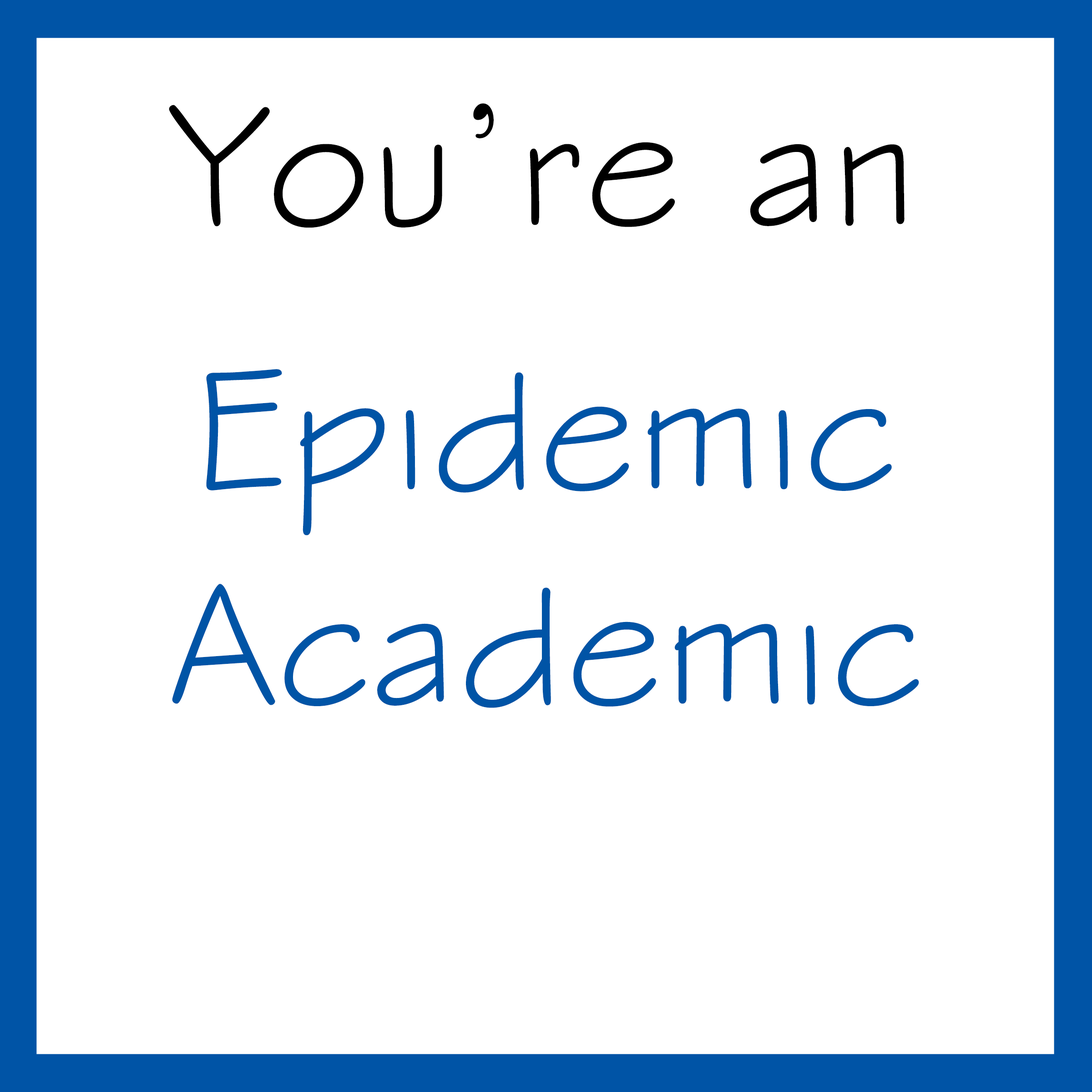
<style>
.page{position:relative;width:1092px;height:1092px;background:#ffffff}
.page>*{position:absolute;margin:0}
.t1{font:179.5px "StylusBT";letter-spacing:0.01em;color:#000000}
.t2{font:179.4px "StylusBT";letter-spacing:0.01em;color:#0054a6}
</style>
<div class="page">
<p class="t1" style="left:169px;top:103px;width:736px;height:125px">You’re an</p>
<p class="t2" style="left:172px;top:369px;width:747px;height:339px;text-align:center">Epidemic<br>Academic</p>
</div>
